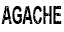
<style>
.page{position:relative;width:64px;height:32px;background:#ffffff}
.page>*{position:absolute;margin:0}
.t1{font:25.1px "Arial-BoldMT";color:#000000;scale:0.55 1}
</style>
<div class="page">
<p class="t1" style="left:1px;top:6px;width:61px;height:18px">AGACHE</p>
</div>
